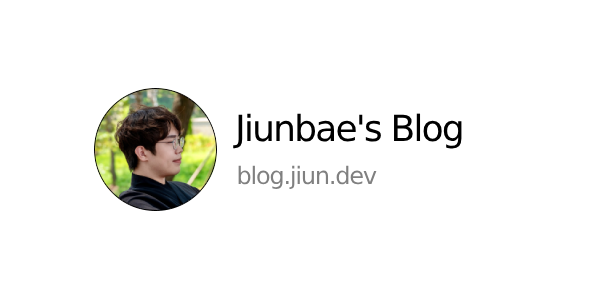
<style>
.page{position:relative;width:615px;height:300px;background:#ffffff}
.page>*{position:absolute;margin:0}
.t1{font:36px "NotoSansCJKkr-Thin";letter-spacing:-0.05em;color:#000000}
.t2{font:24px "NotoSansCJKkr-Thin";letter-spacing:-0.05em;color:#808080}
</style>
<div class="page">
<p class="t1" style="left:233px;top:113px;width:229px;height:36px">Jiunbae's Blog</p>
<p class="t2" style="left:238px;top:165px;width:139px;height:24px">blog.jiun.dev</p>
</div>
